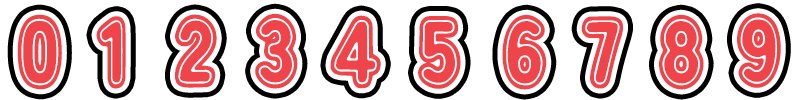
<style>
.page{position:relative;width:800px;height:100px;background:#ffffff}
.page>*{position:absolute;margin:0}
.t1{font:100px "DokiDokiFantasia";color:#ef454a}
</style>
<div class="page">
<p class="t1" style="left:17px;top:14px;width:45px;height:76px">0</p>
<p class="t1" style="left:96px;top:16px;width:30px;height:73px">1</p>
<p class="t1" style="left:175px;top:14px;width:42px;height:74px">2</p>
<p class="t1" style="left:255px;top:13px;width:43px;height:76px">3</p>
<p class="t1" style="left:330px;top:15px;width:51px;height:74px">4</p>
<p class="t1" style="left:418px;top:16px;width:43px;height:73px">5</p>
<p class="t1" style="left:502px;top:14px;width:45px;height:76px">6</p>
<p class="t1" style="left:581px;top:16px;width:42px;height:73px">7</p>
<p class="t1" style="left:659px;top:14px;width:45px;height:76px">8</p>
<p class="t1" style="left:737px;top:13px;width:44px;height:75px">9</p>
</div>
